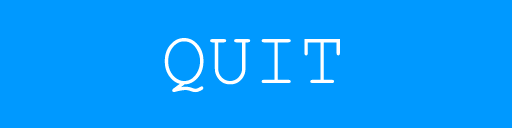
<style>
.page{position:relative;width:512px;height:128px;background:#0099ff}
.page>*{position:absolute;margin:0}
.t1{font:76.8px "CourierNewPSMT";color:#ffffff}
</style>
<div class="page">
<p class="t1" style="left:164px;top:38px;width:176px;height:55px">QUIT</p>
</div>
